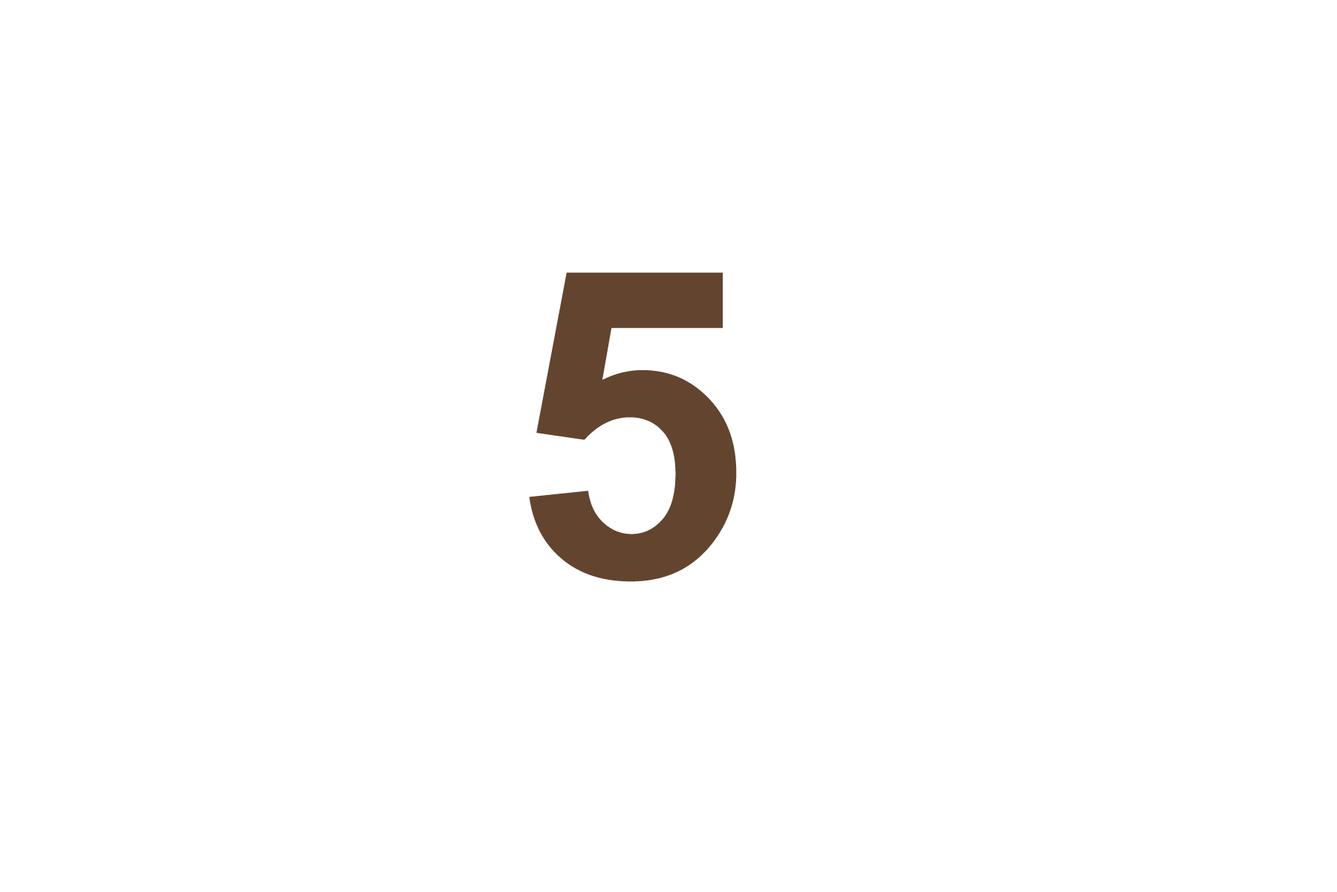
<style>
.page{position:relative;width:1337px;height:892px;background:#ffffff}
.page>*{position:absolute;margin:0}
.t1{font:429.6px "Arial-BoldMT";color:#63442f}
</style>
<div class="page">
<p class="t1" style="left:529px;top:272px;width:208px;height:310px">5</p>
</div>
